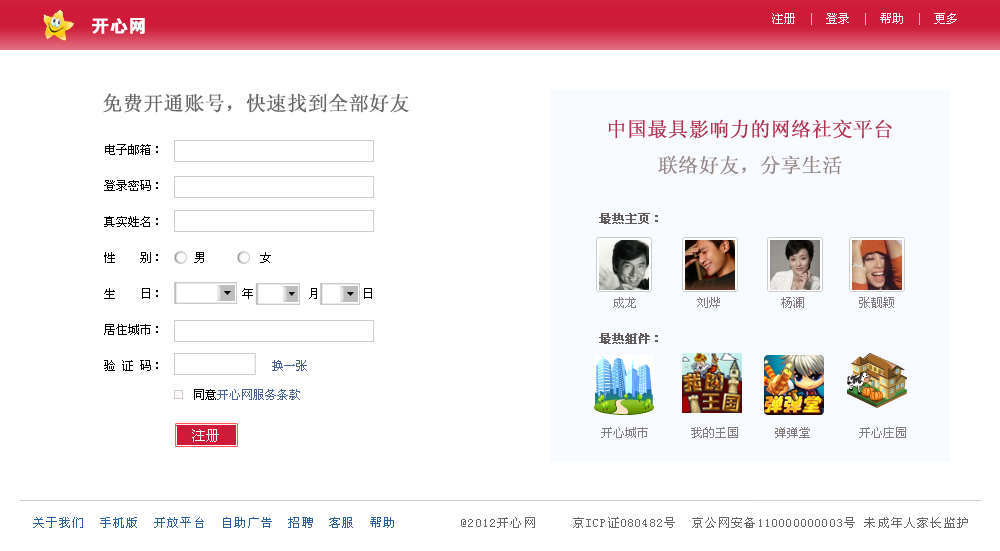
<style>
.page{position:relative;width:1000px;height:551px;background:#ffffff}
.page>*{position:absolute;margin:0}
.t1{font:12px "SimSun";color:#ffffff}
.t2{font:12px "SimSun";color:#dbb9b9}
.t3{font:18px "FZDHTJW--GB1-0";color:#ffffff;font-weight:bold}
.t4{font:20px "SimSun";color:#666666;font-weight:bold}
.t5{font:20px/36px "SimSun";color:#b33250;font-weight:bold}
.t6{font:20px/36px "SimSun";color:#968787;font-weight:bold}
.t7{font:12px/36px "SimSun";color:#020000}
.t8{font:12px/36px "SimSun";color:#4b659a}
.t9{font:12px/30px "SimSun";color:#625b5b;font-weight:bold}
.t10{font:12px "SimSun";color:#4b659a}
.t11{font:12px "SimSun";color:#020000}
.t12{font:14px "SimSun";color:#fefdfd}
.t13{font:12px "SimSun";letter-spacing:0.1em;color:#666666}
.t14{font:12px "SimSun";letter-spacing:0.1em;color:#2b62a5}
</style>
<div class="page">
<p class="t1" style="left:772px;top:13px;width:185px;height:12px">注册  <span class="t2">|</span>  登录  <span class="t2">|</span>  帮助  <span class="t2">|</span>  更多</p>
<p class="t3" style="left:92px;top:18px;width:53px;height:16px">开心网</p>
<p class="t4" style="left:103px;top:93px;width:306px;height:20px">免费开通账号，快速找到全部好友</p>
<p class="t5" style="left:608px;top:119px;width:284px;height:56px;text-align:center">中国最具影响力的网络社交平台<br><span class="t6">联络好友，分享生活</span></p>
<p class="t7" style="left:104px;top:144px;width:268px;height:227px">电子邮箱：<br>登录密码：<br>真实姓名：<br>性    别：     男         女<br>生    日：             年         月       日<br>居住城市：<br>验 证 码：                  <span class="t8">换一张</span></p>
<p class="t9" style="left:599px;top:213px;width:59px;height:131px">最热主页：<br><br><br><br>最热组件：</p>
<p class="t10" style="left:194px;top:389px;width:106px;height:11px"><span class="t11">同意</span>开心网服务条款</p>
<p class="t12" style="left:192px;top:429px;width:27px;height:13px">注册</p>
<p class="t13" style="left:33px;top:517px;width:935px;height:11px"><span class="t14">    关于我们  手机版  开放平台  自助广告  招聘  客服  帮助         </span>@2012开心网     京ICP证080482号  京公网安备110000000003号 未成年人家长监护</p>
</div>
